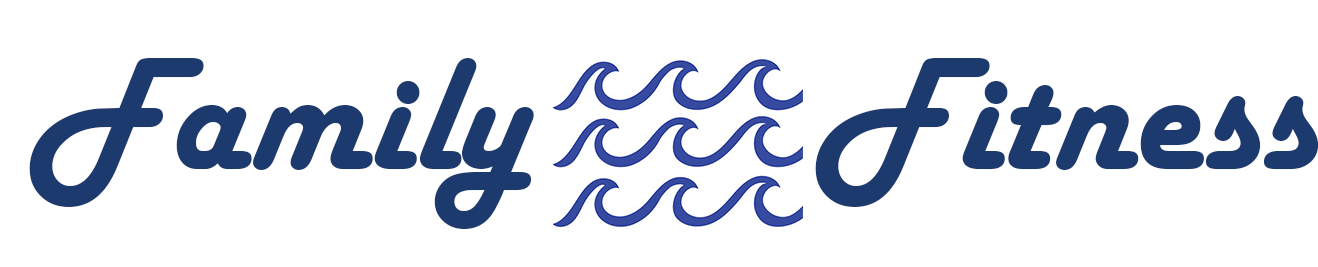
<style>
.page{position:relative;width:1318px;height:267px;background:#ffffff}
.page>*{position:absolute;margin:0}
.t1{font:166.7px "HarlowSolid";color:#1d3a6e}
</style>
<div class="page">
<p class="t1" style="left:29px;top:58px;width:505px;height:171px">Family</p>
<p class="t1" style="left:815px;top:58px;width:503px;height:149px">Fitness</p>
</div>
